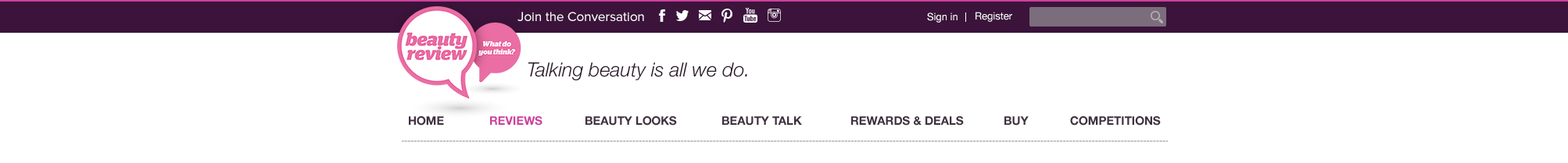
<style>
.page{position:relative;width:1568px;height:163px;background:#ffffff}
.page>*{position:absolute;margin:0}
.t1{font:13.3px "ProximaNova-Regular";color:#ffffff}
.t2{font:10.2px "HelveticaNeue";color:#ffffff}
.t3{font:10.2px "HelveticaNeue";color:#f7f7f7}
.t4{font:19.5px "HelveticaNeue-LightItalic";color:#291b29}
.t5{font:11.7px "HelveticaNeue-Bold";color:#3e313e}
.t6{font:11.7px "HelveticaNeue-Bold";color:#cc419c}
</style>
<div class="page">
<p class="t1" style="left:517px;top:12px;width:127px;height:9px">Join the Conversation</p>
<p class="t2" style="left:927px;top:13px;width:31px;height:10px">Sign in</p>
<p class="t3" style="left:976px;top:12px;width:36px;height:10px">Register</p>
<p class="t4" style="left:528px;top:63px;width:219px;height:18px">Talking beauty is all we do.</p>
<p class="t5" style="left:409px;top:116px;width:35px;height:10px">HOME</p>
<p class="t6" style="left:490px;top:116px;width:52px;height:10px">REVIEWS</p>
<p class="t5" style="left:585px;top:116px;width:92px;height:10px">BEAUTY LOOKS</p>
<p class="t5" style="left:722px;top:116px;width:80px;height:10px">BEAUTY TALK</p>
<p class="t5" style="left:851px;top:116px;width:113px;height:10px">REWARDS &amp; DEALS</p>
<p class="t5" style="left:1004px;top:116px;width:25px;height:10px">BUY</p>
<p class="t5" style="left:1070px;top:116px;width:91px;height:10px">COMPETITIONS</p>
</div>
